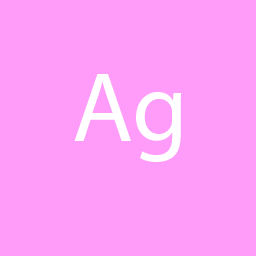
<style>
.page{position:relative;width:256px;height:256px;background:#ff9bf9}
.page>*{position:absolute;margin:0}
.t1{font:100px "MyriadPro-Regular";color:#ffffff}
</style>
<div class="page">
<p class="t1" style="left:74px;top:74px;width:108px;height:88px">Ag</p>
</div>
